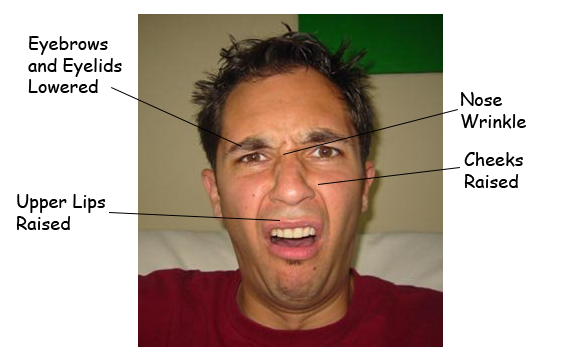
<style>
.page{position:relative;width:576px;height:360px;background:#ffffff}
.page>*{position:absolute;margin:0}
.t1{font:18px "ComicSansMS";color:#000000}
</style>
<div class="page">
<p class="t1" style="left:28px;top:36px;width:94px;height:57px">Eyebrows <br>and Eyelids<br>Lowered</p>
<p class="t1" style="left:461px;top:92px;width:65px;height:37px">Nose<br>Wrinkle</p>
<p class="t1" style="left:464px;top:152px;width:59px;height:36px">Cheeks<br>Raised</p>
<p class="t1" style="left:16px;top:194px;width:89px;height:36px">Upper Lips<br>Raised</p>
</div>
